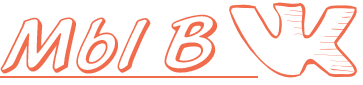
<style>
.page{position:relative;width:363px;height:85px;background:#ffffff}
.page>*{position:absolute;margin:0}
.t1{font:84px "HighlightLetPlain";color:#f16c4d}
.t2{font:83px "HighlightLetPlain";color:#f16c4d}
</style>
<div class="page">
<p class="t1" style="left:0px;top:17px;width:151px;height:57px">Mbl</p>
<p class="t2" style="left:164px;top:14px;width:54px;height:59px">B</p>
</div>
